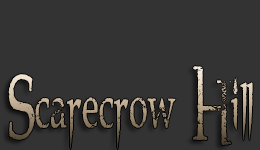
<style>
.page{position:relative;width:260px;height:150px;background:#333333}
.page>*{position:absolute;margin:0}
.t1{font:82.3px "NorthwoodHigh";scale:0.63 1}
</style>
<div class="page">
<p class="t1" style="left:8px;top:66px;width:245px;height:84px">Scarecrow Hill</p>
</div>
